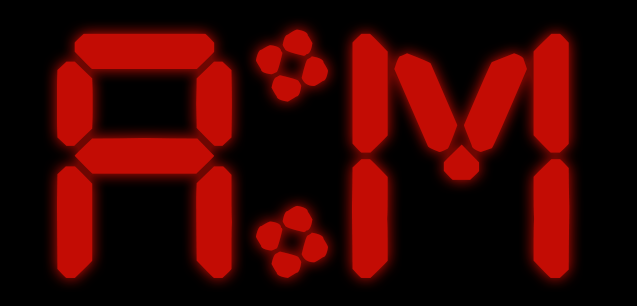
<style>
.page{position:relative;width:637px;height:306px;background:#000000}
.page>*{position:absolute;margin:0}
.t1{font:248px "DigitalPlaySt";color:#c30c04;text-transform:uppercase}
</style>
<div class="page">
<p class="t1" style="left:57px;top:29px;width:513px;height:249px">a:m</p>
</div>
